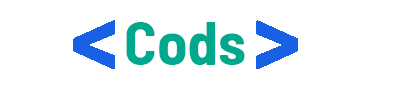
<style>
.page{position:relative;width:400px;height:100px;background:#ffffff}
.page>*{position:absolute;margin:0}
.t1{font:61.1px "BarlowSemiCondensed-Bold";color:#00a88e}
</style>
<div class="page">
<p class="t1" style="left:126px;top:22px;width:119px;height:43px">Cods</p>
</div>
